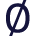
<style>
.page{position:relative;width:36px;height:36px;background:#ffffff}
.page>*{position:absolute;margin:0}
.t1{font:45.8px "Cambria";color:#15143c}
</style>
<div class="page">
<p class="t1" style="left:6px;top:0px;width:24px;height:37px">∅</p>
</div>
